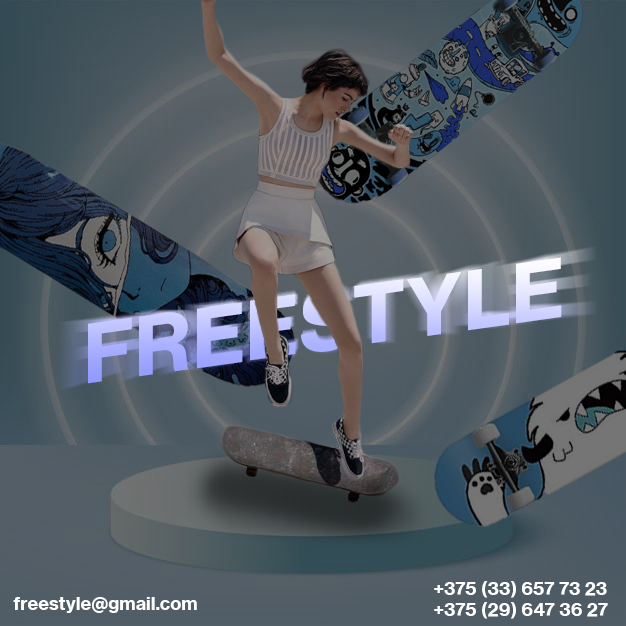
<style>
.page{position:relative;width:626px;height:626px}
.page>*{position:absolute;margin:0}
.t1{font:80px "NeueHaasGroteskTextPro-Bold"}
.t2{font:18px "NeueHaasGroteskTextPro-Bold";color:#ffffff}
</style>
<div class="page">
<p class="t1" style="left:88px;top:257px;width:474px;height:127px;rotate:-8deg">FREESTYLE</p>
<p class="t2" style="left:434px;top:581px;width:174px;height:38px">+375 (33) 657 73 23<br>+375 (29) 647 36 27</p>
<p class="t2" style="left:13px;top:597px;width:184px;height:16px">freestyle@gmail.com</p>
</div>
